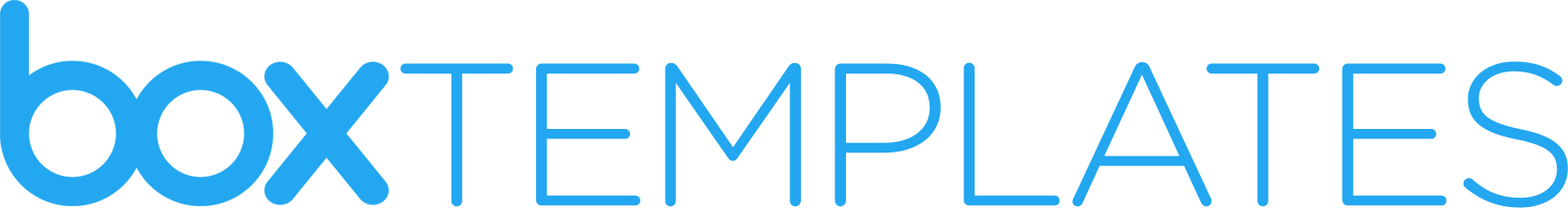
<style>
.page{position:relative;width:1568px;height:208px;background:#ffffff}
.page>*{position:absolute;margin:0}
.t1{font:201.9px "GothamRounded-Light";letter-spacing:-0.04em;color:#23a7f0}
</style>
<div class="page">
<p class="t1" style="left:400px;top:61px;width:1168px;height:147px">TEMPLATES</p>
</div>
